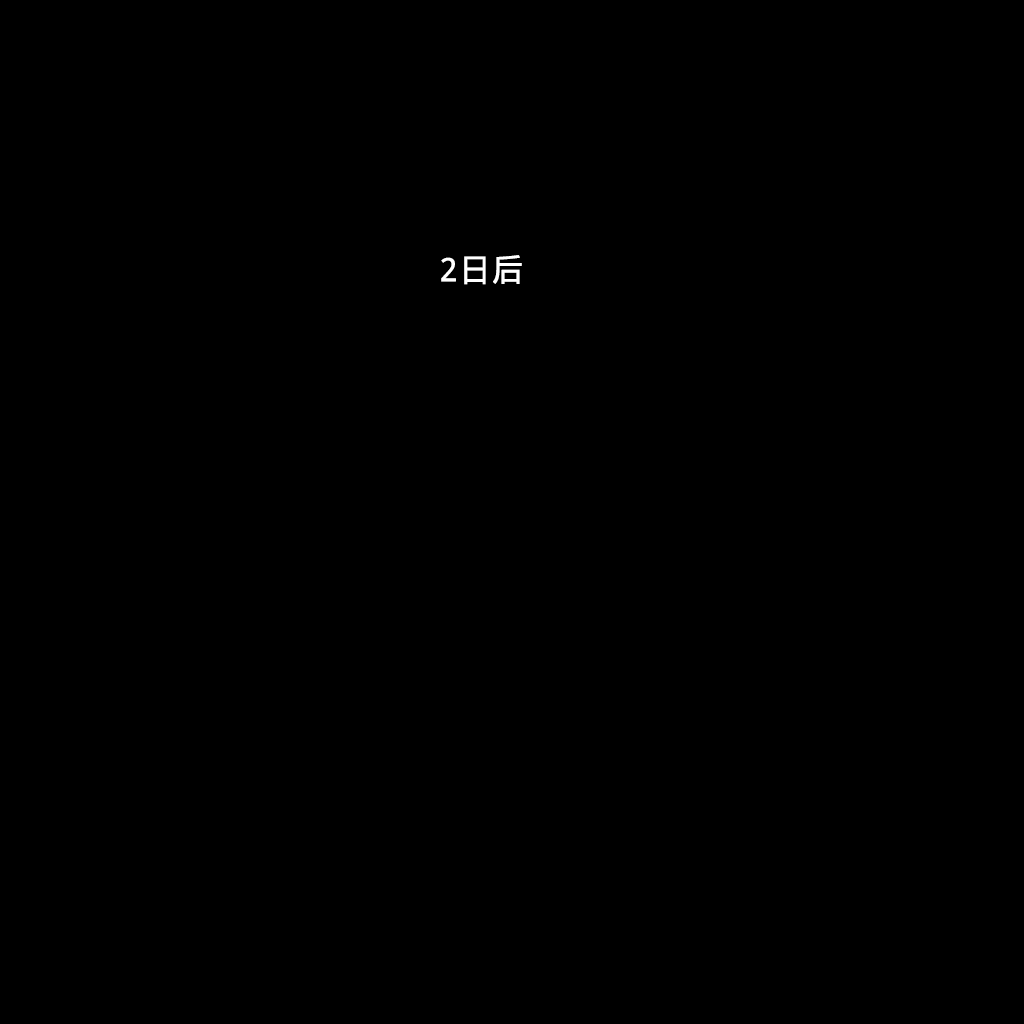
<style>
.page{position:relative;width:1024px;height:1024px;background:#000000}
.page>*{position:absolute;margin:0}
.t1{font:32px "WenQuanYiMicroHeiMono";color:#ffffff;font-weight:bold}
</style>
<div class="page">
<p class="t1" style="left:441px;top:255px;width:81px;height:30px">2日后</p>
</div>
